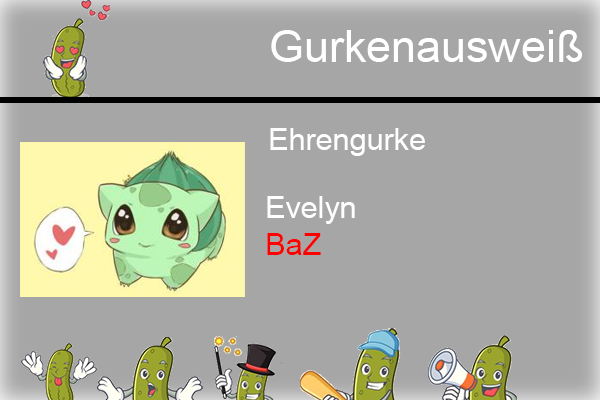
<style>
.page{position:relative;width:600px;height:400px;background:#a6a6a6}
.page>*{position:absolute;margin:0}
.t1{font:44.8px "ArialMT";color:#ffffff}
.t2{font:30.5px "ArialMT";color:#ffffff}
.t3{font:30.5px "ArialMT";color:#ff0000}
</style>
<div class="page">
<p class="t1" style="left:271px;top:30px;width:311px;height:32px">Gurkenausweiß</p>
<p class="t2" style="left:270px;top:128px;width:155px;height:28px">Ehrengurke</p>
<p class="t2" style="left:267px;top:196px;width:88px;height:59px">Evelyn<br><span class="t3">BaZ</span></p>
</div>
